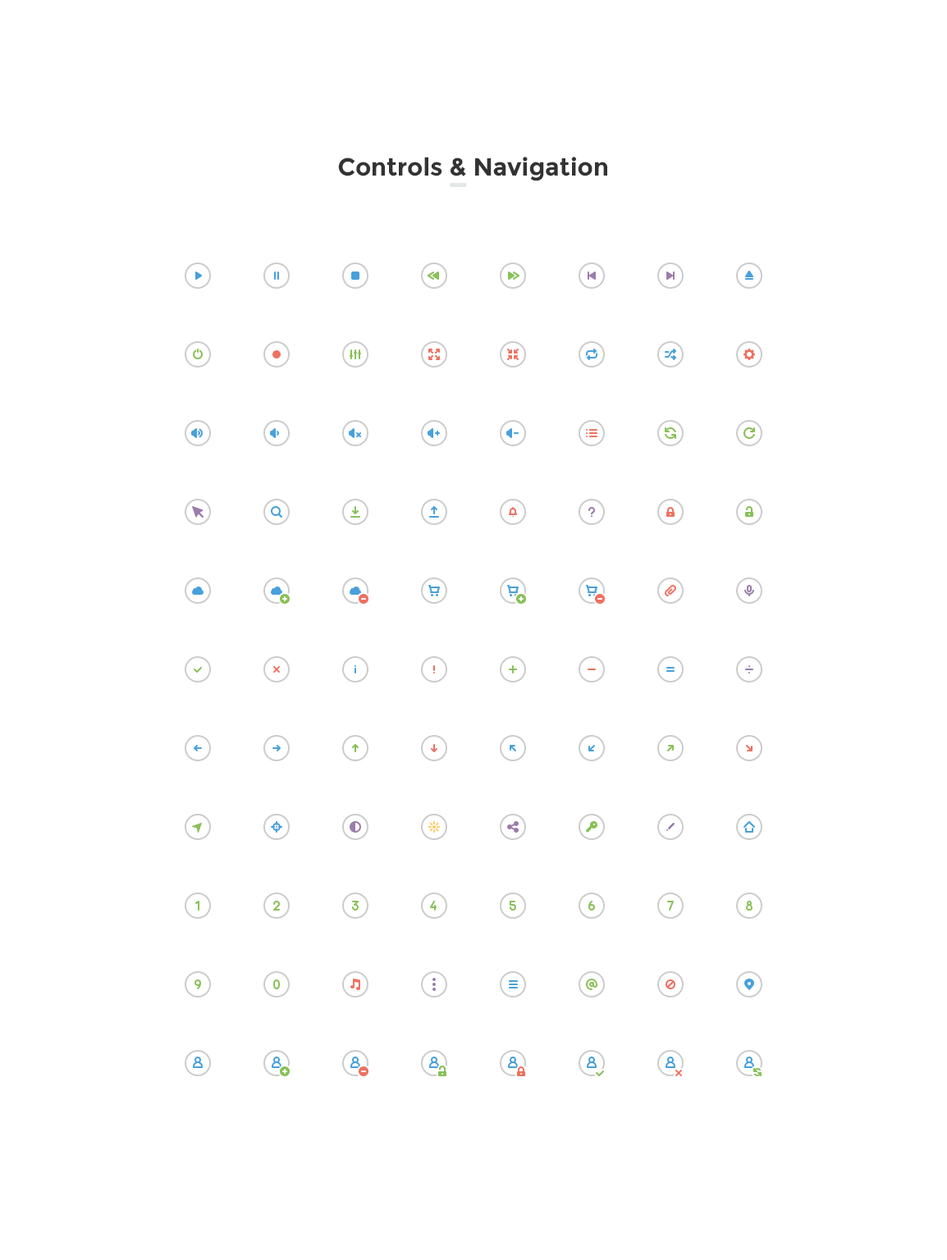
<style>
.page{position:relative;width:947px;height:1260px;background:#ffffff}
.page>*{position:absolute;margin:0}
.t1{font:24.6px "Montserrat-Bold";color:#333333}
</style>
<div class="page">
<p class="t1" style="left:338px;top:157px;width:269px;height:24px">Controls &amp; Navigation</p>
</div>
